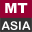
<style>
.page{position:relative;width:32px;height:32px;background:#990033}
.page>*{position:absolute;margin:0}
.t1{font:14px "Arial-Black";color:#ffffff}
.t2{font:12px "ArialRoundedMTBold";color:#ffffff}
</style>
<div class="page">
<p class="t1" style="left:5px;top:3px;width:23px;height:10px">MT</p>
<p class="t2" style="left:1px;top:21px;width:30px;height:9px">ASIA</p>
</div>
